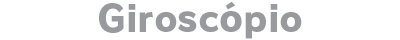
<style>
.page{position:relative;width:400px;height:40px;background:#ffffff}
.page>*{position:absolute;margin:0}
.t1{font:36px "RodinPro-EB";letter-spacing:0.003em;color:#989a9d}
</style>
<div class="page">
<p class="t1" style="left:99px;top:1px;width:203px;height:38px">Giroscópio</p>
</div>
